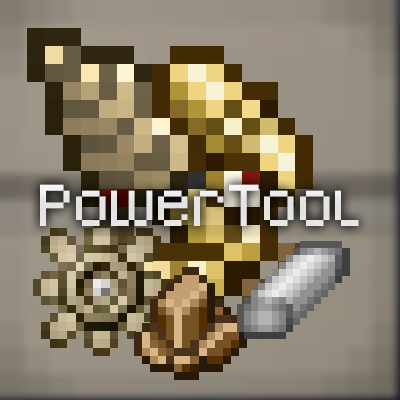
<style>
.page{position:relative;width:400px;height:400px}
.page>*{position:absolute;margin:0}
.t1{font:94.2px "Kenney-Pixel";color:#e5e5e5}
</style>
<div class="page">
<p class="t1" style="left:40px;top:184px;width:319px;height:42px">PowerTool</p>
</div>
